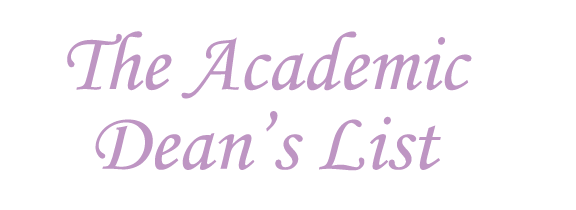
<style>
.page{position:relative;width:576px;height:210px;background:#ffffff}
.page>*{position:absolute;margin:0}
.t1{font:83.4px/79.7px "MonotypeCorsiva";color:#be95c3}
</style>
<div class="page">
<p class="t1" style="left:67px;top:31px;width:405px;height:140px;text-align:center">The Academic<br>Dean’s List</p>
</div>
